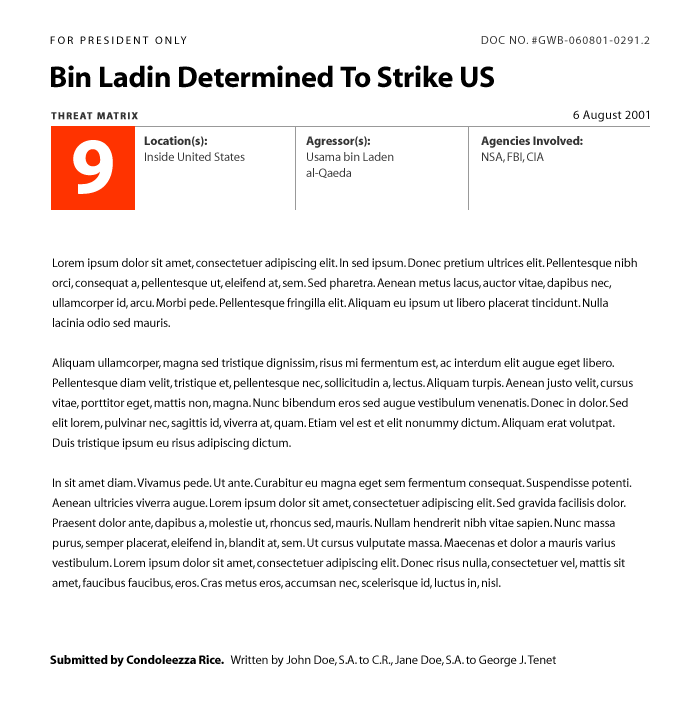
<style>
.page{position:relative;width:700px;height:701px;background:#ffffff}
.page>*{position:absolute;margin:0}
.t1{font:11px "Myriad-Roman";letter-spacing:0.2em;color:#000000}
.t2{font:11.5px "Myriad-Roman";letter-spacing:0.075em;color:#333333}
.t3{font:30px "Myriad-Bold";letter-spacing:-0.01em;color:#000000}
.t4{font:10px "Myriad-Bold";letter-spacing:0.1em;color:#333333;font-weight:bold}
.t5{font:12.5px "Myriad-Roman";letter-spacing:0.025em;color:#000000}
.t6{font:12.5px/16px "Myriad-Roman";letter-spacing:-0.01em;color:#333333}
.t7{font:12.5px/16px "Myriad-Bold";letter-spacing:-0.01em;color:#333333}
.t8{font:80px "Myriad-Bold";letter-spacing:-0.15em;color:#ffffff}
.t9{font:12.5px/20px "Myriad-Roman";letter-spacing:-0.01em;color:#000000}
.t10{font:12.5px "Myriad-Roman";letter-spacing:-0.01em;color:#000000}
.t11{font:12.5px "Myriad-Bold";letter-spacing:-0.01em;color:#000000}
</style>
<div class="page">
<p class="t1" style="left:50px;top:36px;width:137px;height:8px">FOR PRESIDENT ONLY</p>
<p class="t2" style="left:481px;top:36px;width:169px;height:8px">DOC NO. #GWB-060801-0291.2</p>
<p class="t3" style="left:51px;top:65px;width:443px;height:23px">Bin Ladin Determined To Strike US</p>
<p class="t4" style="left:51px;top:112px;width:87px;height:8px">THREAT MATRIX</p>
<p class="t5" style="left:573px;top:110px;width:76px;height:12px">6 August 2001</p>
<p class="t6" style="left:144px;top:136px;width:101px;height:25px"><span class="t7">Location(s):      <br></span>Inside United States</p>
<p class="t6" style="left:306px;top:136px;width:88px;height:42px"><span class="t7">Agressor(s):<br></span>Usama bin Laden<br>al-Qaeda</p>
<p class="t7" style="left:481px;top:136px;width:102px;height:27px">Agencies Involved:      <br><span class="t6">NSA, FBI, CIA</span></p>
<p class="t8" style="left:73px;top:140px;width:40px;height:54px">9</p>
<p class="t9" style="left:52px;top:258px;width:585px;height:332px">Lorem ipsum dolor sit amet, consectetuer adipiscing elit. In sed ipsum. Donec pretium ultrices elit. Pellentesque nibh <br>orci, consequat a, pellentesque ut, eleifend at, sem. Sed pharetra. Aenean metus lacus, auctor vitae, dapibus nec, <br>ullamcorper id, arcu. Morbi pede. Pellentesque fringilla elit. Aliquam eu ipsum ut libero placerat tincidunt. Nulla <br>lacinia odio sed mauris. <br><br>Aliquam ullamcorper, magna sed tristique dignissim, risus mi fermentum est, ac interdum elit augue eget libero. <br>Pellentesque diam velit, tristique et, pellentesque nec, sollicitudin a, lectus. Aliquam turpis. Aenean justo velit, cursus <br>vitae, porttitor eget, mattis non, magna. Nunc bibendum eros sed augue vestibulum venenatis. Donec in dolor. Sed <br>elit lorem, pulvinar nec, sagittis id, viverra at, quam. Etiam vel est et elit nonummy dictum. Aliquam erat volutpat. <br>Duis tristique ipsum eu risus adipiscing dictum.<br><br>In sit amet diam. Vivamus pede. Ut ante. Curabitur eu magna eget sem fermentum consequat. Suspendisse potenti. <br>Aenean ultricies viverra augue. Lorem ipsum dolor sit amet, consectetuer adipiscing elit. Sed gravida facilisis dolor. <br>Praesent dolor ante, dapibus a, molestie ut, rhoncus sed, mauris. Nullam hendrerit nibh vitae sapien. Nunc massa <br>purus, semper placerat, eleifend in, blandit at, sem. Ut cursus vulputate massa. Maecenas et dolor a mauris varius <br>vestibulum. Lorem ipsum dolor sit amet, consectetuer adipiscing elit. Donec risus nulla, consectetuer vel, mattis sit <br>amet, faucibus faucibus, eros. Cras metus eros, accumsan nec, scelerisque id, luctus in, nisl.</p>
<p class="t10" style="left:50px;top:655px;width:506px;height:12px"><span class="t11">Submitted by Condoleezza Rice.   </span>Written by John Doe, S.A. to C.R., Jane Doe, S.A. to George J. Tenet</p>
</div>
